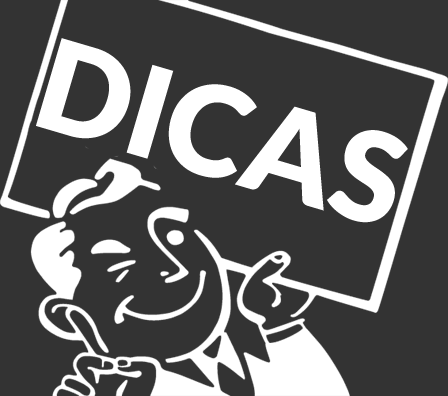
<style>
.page{position:relative;width:448px;height:396px;background:#333333}
.page>*{position:absolute;margin:0}
.t1{font:125px "Lato-Black";color:#ffffff}
</style>
<div class="page">
<p class="t1" style="left:36px;top:38px;width:372px;height:185px;rotate:16deg">DICAS</p>
</div>
